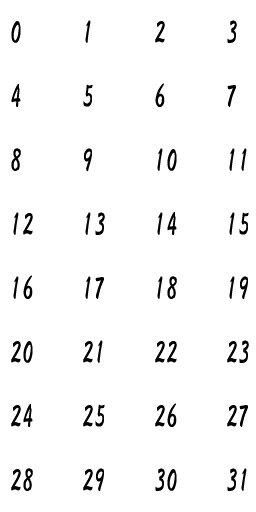
<style>
.page{position:relative;width:256px;height:512px;background:#ffffff}
.page>*{position:absolute;margin:0}
.t1{font:32px/64px "HGSGyoshotai";color:#000000;scale:0.8 1}
</style>
<div class="page">
<p class="t1" style="left:11px;top:20px;width:238px;height:472px">0  1  2  3<br>4  5  6  7<br>8  9  10  11<br>12  13  14  15<br>16  17  18  19<br>20  21  22  23<br>24  25  26  27<br>28  29  30  31</p>
</div>
